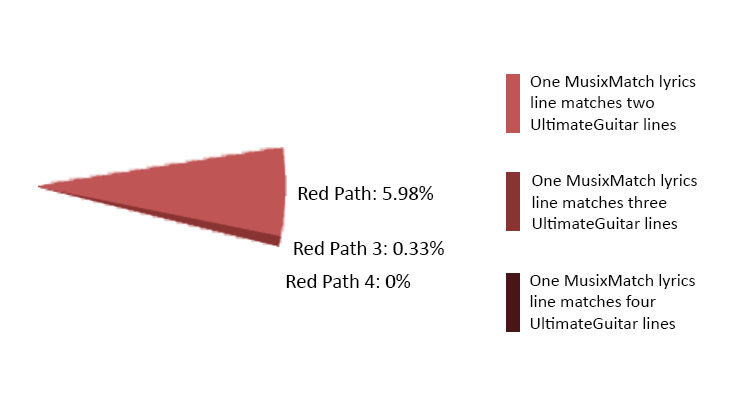
<style>
.page{position:relative;width:750px;height:400px;background:#ffffff}
.page>*{position:absolute;margin:0}
.t1{font:18px "Calibri";color:#000000}
.t2{font:20.7px "Calibri";color:#000000}
</style>
<div class="page">
<p class="t1" style="left:530px;top:75px;width:166px;height:55px">One MusixMatch lyrics<br>line matches two <br>UltimateGuitar lines</p>
<p class="t1" style="left:532px;top:174px;width:165px;height:55px">One MusixMatch lyrics<br>line matches three<br>UltimateGuitar lines</p>
<p class="t2" style="left:298px;top:186px;width:136px;height:14px">Red Path: 5.98%</p>
<p class="t2" style="left:294px;top:241px;width:150px;height:14px">Red Path 3: 0.33%</p>
<p class="t2" style="left:286px;top:274px;width:125px;height:14px">Red Path 4: 0%</p>
<p class="t1" style="left:530px;top:274px;width:165px;height:55px">One MusixMatch lyrics<br>line matches four<br>UltimateGuitar lines</p>
</div>
